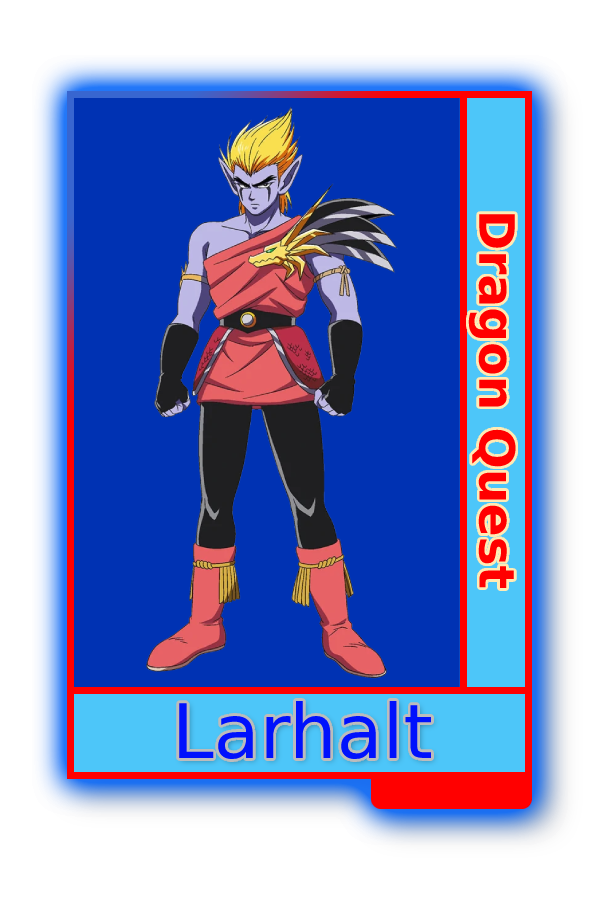
<style>
.page{position:relative;width:600px;height:900px;background:#0032b3}
.page>*{position:absolute;margin:0}
.t1{font:48.8px "MADETOMMY-Bold";color:#ff0000}
.t2{font:75px "CoolveticaRg-Regular";color:#0011fd}
</style>
<div class="page">
<p class="t1" style="left:468px;top:214px;width:48px;height:374px;rotate:90deg">Dragon Quest</p>
<p class="t2" style="left:179px;top:701px;width:253px;height:59px">Larhalt</p>
</div>
